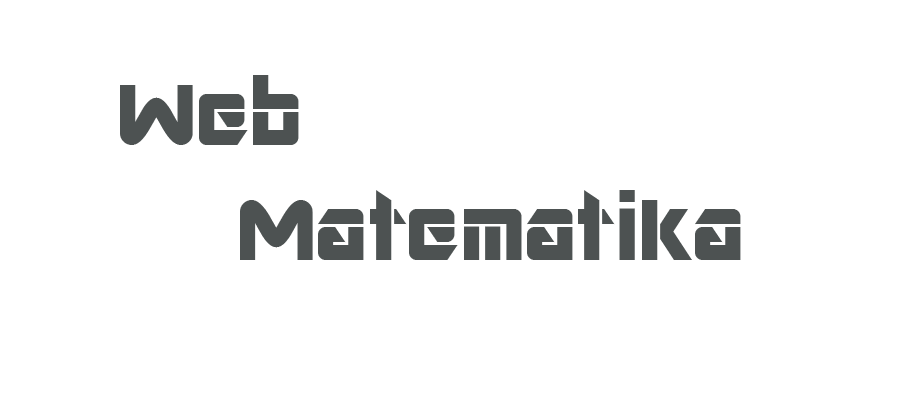
<style>
.page{position:relative;width:900px;height:400px;background:#ffffff}
.page>*{position:absolute;margin:0}
.t1{font:96px "ARDESTINE";color:#4d5252}
</style>
<div class="page">
<p class="t1" style="left:120px;top:75px;width:621px;height:185px;text-align:center">Web <br>Matematika</p>
</div>
